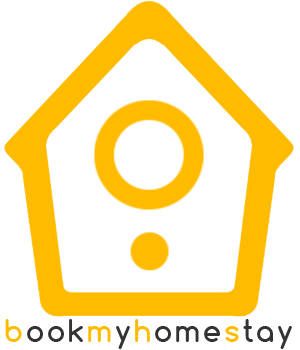
<style>
.page{position:relative;width:300px;height:350px;background:#ffffff}
.page>*{position:absolute;margin:0}
.t1{font:29px "Comfortaa-Bold";letter-spacing:0.105em;color:#333333}
.t2{font:29px "Comfortaa-Bold";letter-spacing:0.105em;color:#ffbb00}
</style>
<div class="page">
<p class="t1" style="left:5px;top:319px;width:287px;height:30px"><span class="t2">b</span>ook<span class="t2">m</span>y<span class="t2">h</span>ome<span class="t2">s</span>tay</p>
</div>
